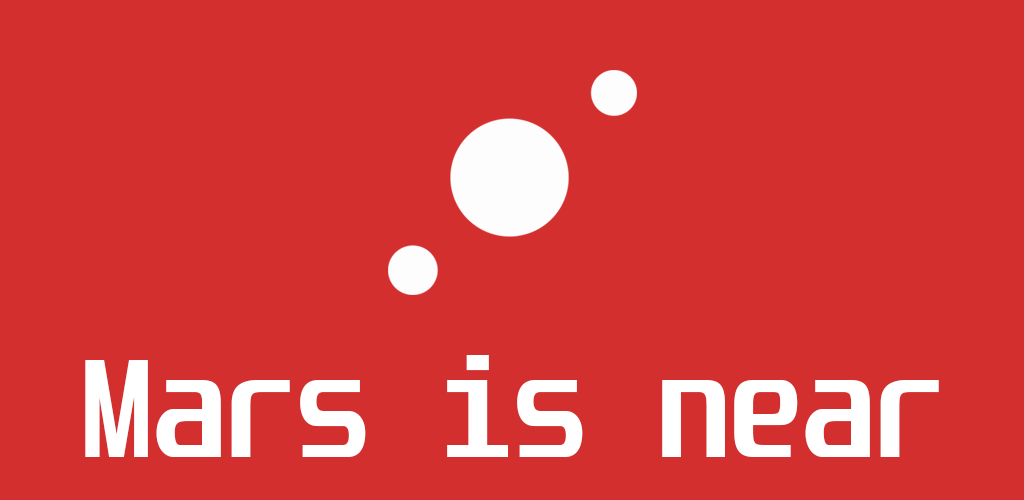
<style>
.page{position:relative;width:1024px;height:500px;background:#d32f2f}
.page>*{position:absolute;margin:0}
.t1{font:120px "Unispace-Bold";letter-spacing:-0.01em;color:#ffffff}
</style>
<div class="page">
<p class="t1" style="left:85px;top:355px;width:854px;height:102px">Mars is near</p>
</div>
